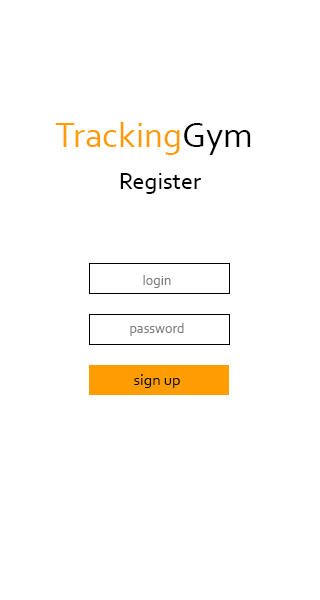
<style>
.page{position:relative;width:320px;height:600px;background:#ffffff}
.page>*{position:absolute;margin:0}
.t1{font:36px "Corbel";color:#ff9c00}
.t2{font:36px "Corbel";color:#000000}
.t3{font:24px "Corbel";color:#000000}
.t4{font:14px "Corbel";color:#7b7b7b}
.t5{font:16px "Corbel";color:#000000}
</style>
<div class="page">
<p class="t1" style="left:55px;top:122px;width:196px;height:33px">Tracking<span class="t2">Gym</span></p>
<p class="t3" style="left:120px;top:173px;width:81px;height:21px">Register</p>
<p class="t4" style="left:143px;top:275px;width:28px;height:13px">login</p>
<p class="t4" style="left:130px;top:323px;width:54px;height:13px">password</p>
<p class="t5" style="left:134px;top:374px;width:46px;height:14px">sign up</p>
</div>
